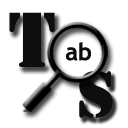
<style>
.page{position:relative;width:128px;height:128px;background:#ffffff}
.page>*{position:absolute;margin:0}
.t1{font:72px "StencilStd";color:#0f0d0d}
.t2{font:24px "TrebuchetMS-Bold";color:#0f0d0d}
.t3{font:60px "StencilStd";color:#0f0d0d}
</style>
<div class="page">
<p class="t1" style="left:9px;top:12px;width:46px;height:55px">T</p>
<p class="t2" style="left:66px;top:42px;width:25px;height:19px">ab</p>
<p class="t3" style="left:79px;top:71px;width:34px;height:47px">s</p>
</div>
